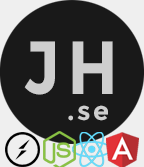
<style>
.page{position:relative;width:144px;height:167px;background:#191919}
.page>*{position:absolute;margin:0}
.t1{font:26px/26px "Montserrat-Bold";letter-spacing:0.1em;color:#cecece}
.t2{font:75.2px/39.8px "Montserrat-Bold";letter-spacing:0.1em;color:#cecece;scale:0.89 1}
</style>
<div class="page">
<p class="t1" style="left:24px;top:41px;width:89px;height:80px;text-align:center"><span class="t2">JH<br></span>.se</p>
</div>
